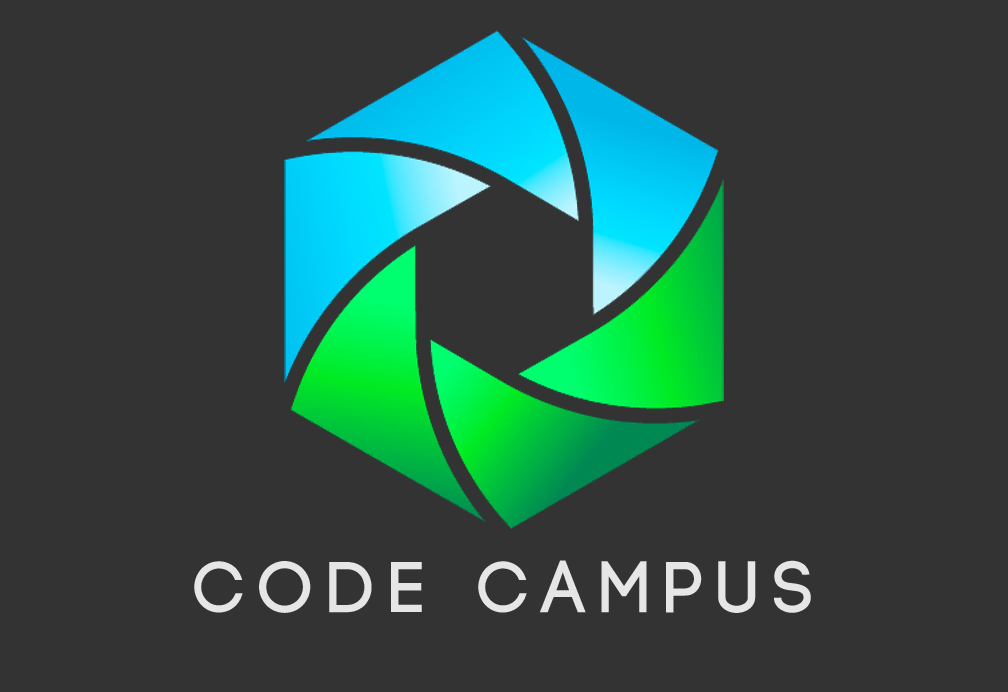
<style>
.page{position:relative;width:1008px;height:692px;background:#333333}
.page>*{position:absolute;margin:0}
.t1{font:72px "Code-Bold";letter-spacing:0.2em;color:#e6e6e6}
</style>
<div class="page">
<p class="t1" style="left:194px;top:560px;width:617px;height:53px">CODE CAMPUS</p>
</div>
